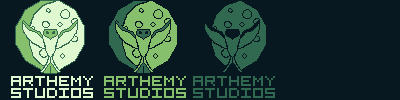
<style>
.page{position:relative;width:400px;height:100px;background:#071821}
.page>*{position:absolute;margin:0}
.t1{font:16px/12px "5x5-Pixel";color:#e0f8cf;text-transform:uppercase}
.t2{font:16px/12px "5x5-Pixel";color:#86c06c;text-transform:uppercase}
.t3{font:16px/12px "5x5-Pixel";color:#306850;text-transform:uppercase}
</style>
<div class="page">
<p class="t1" style="left:11px;top:76px;width:82px;height:22px;text-align:center">Arthemy<br>Studios</p>
<p class="t2" style="left:104px;top:76px;width:82px;height:22px;text-align:center">Arthemy<br>Studios</p>
<p class="t3" style="left:193px;top:76px;width:82px;height:22px;text-align:center">Arthemy<br>Studios</p>
</div>
